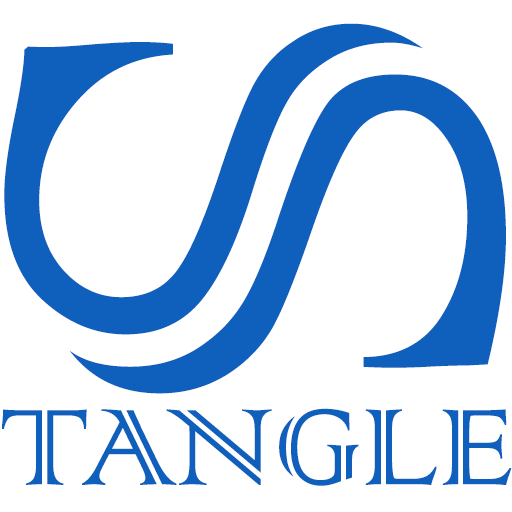
<style>
.page{position:relative;width:512px;height:512px;background:#ffffff}
.page>*{position:absolute;margin:0}
.t1{font:935.5px "ColonnaMT";color:#0e60bc}
.t2{font:143.6px "ColonnaMT";color:#0e60bc}
</style>
<div class="page">
<p class="t1" style="left:4px;top:23px;width:502px;height:371px;rotate:90deg">S</p>
<p class="t2" style="left:2px;top:408px;width:510px;height:78px">TANGLE</p>
</div>
